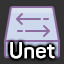
<style>
.page{position:relative;width:64px;height:64px;background:#333333}
.page>*{position:absolute;margin:0}
.t1{font:21.3px "Panton-Bold";color:#ffffff}
</style>
<div class="page">
<p class="t1" style="left:10px;top:42px;width:45px;height:17px">Unet</p>
</div>
